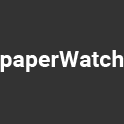
<style>
.page{position:relative;width:124px;height:124px;background:#333333}
.page>*{position:absolute;margin:0}
.t1{font:23.1px "Roboto-Bold";color:#ffffff}
</style>
<div class="page">
<p class="t1" style="left:0px;top:50px;width:124px;height:22px">paperWatch</p>
</div>
